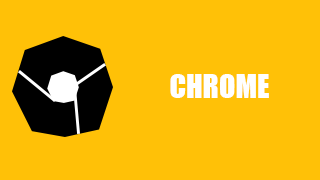
<style>
.page{position:relative;width:320px;height:180px;background:#ffc107}
.page>*{position:absolute;margin:0}
.t1{font:30px "Impact";color:#ffffff}
</style>
<div class="page">
<p class="t1" style="left:170px;top:74px;width:99px;height:24px">CHROME</p>
</div>
